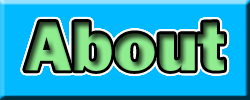
<style>
.page{position:relative;width:250px;height:100px;background:#00b9ff}
.page>*{position:absolute;margin:0}
.t1{font:72px "FranklinGothic-Heavy";color:#90ee90}
</style>
<div class="page">
<p class="t1" style="left:25px;top:22px;width:199px;height:49px">About</p>
</div>
